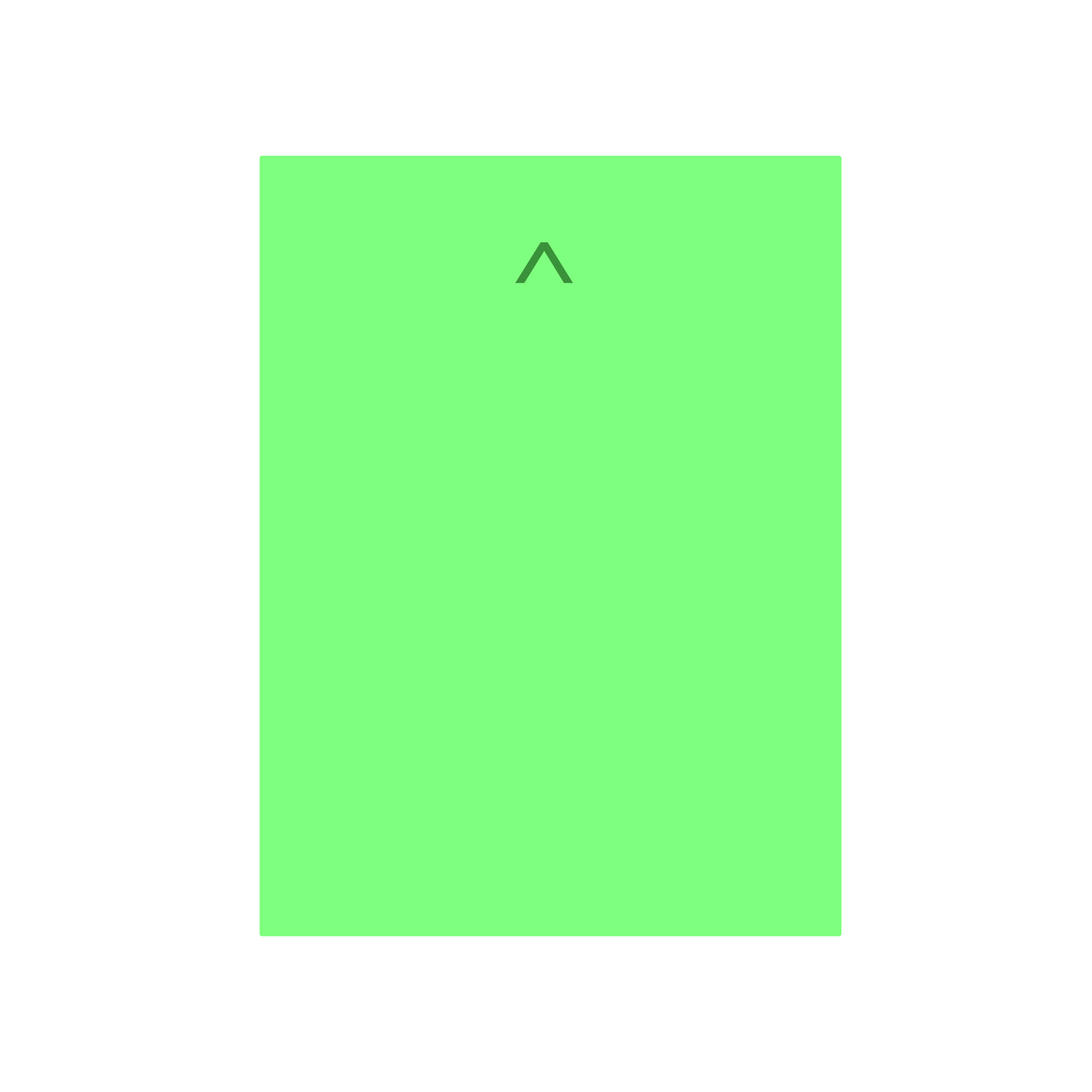
<style>
.page{position:relative;width:1092px;height:1092px;background:#ffffff}
.page>*{position:absolute;margin:0}
.t1{font:126.4px "Georgia";letter-spacing:-0.03em;color:#399239}
</style>
<div class="page">
<p class="t1" style="left:515px;top:242px;width:58px;height:41px">^</p>
</div>
